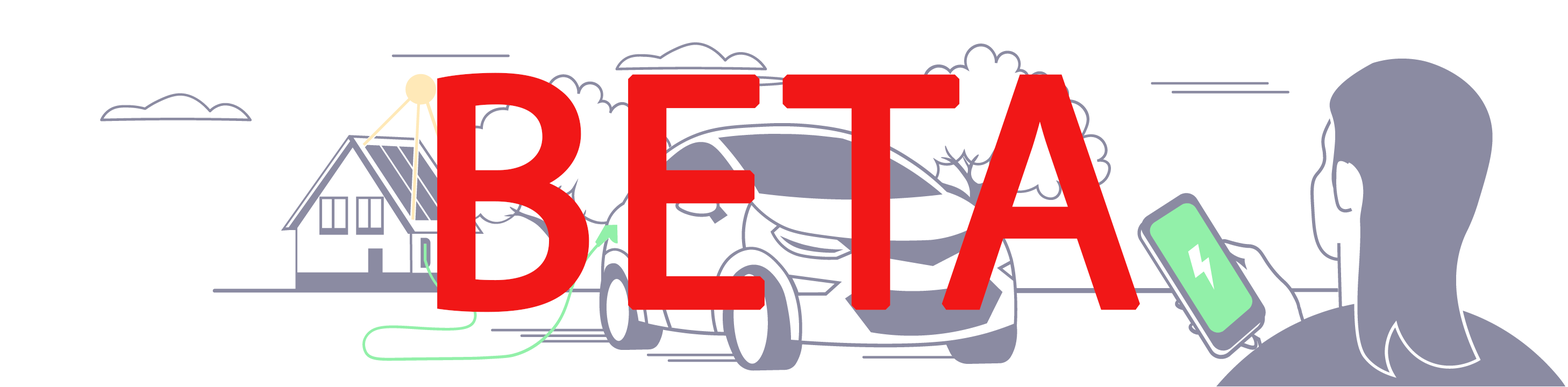
<style>
.page{position:relative;width:1568px;height:387px;background:#ffffff}
.page>*{position:absolute;margin:0}
.t1{font:336.1px "MyriadPro-Regular";color:#f11717;font-weight:bold}
</style>
<div class="page">
<p class="t1" style="left:437px;top:73px;width:703px;height:239px">BETA</p>
</div>
